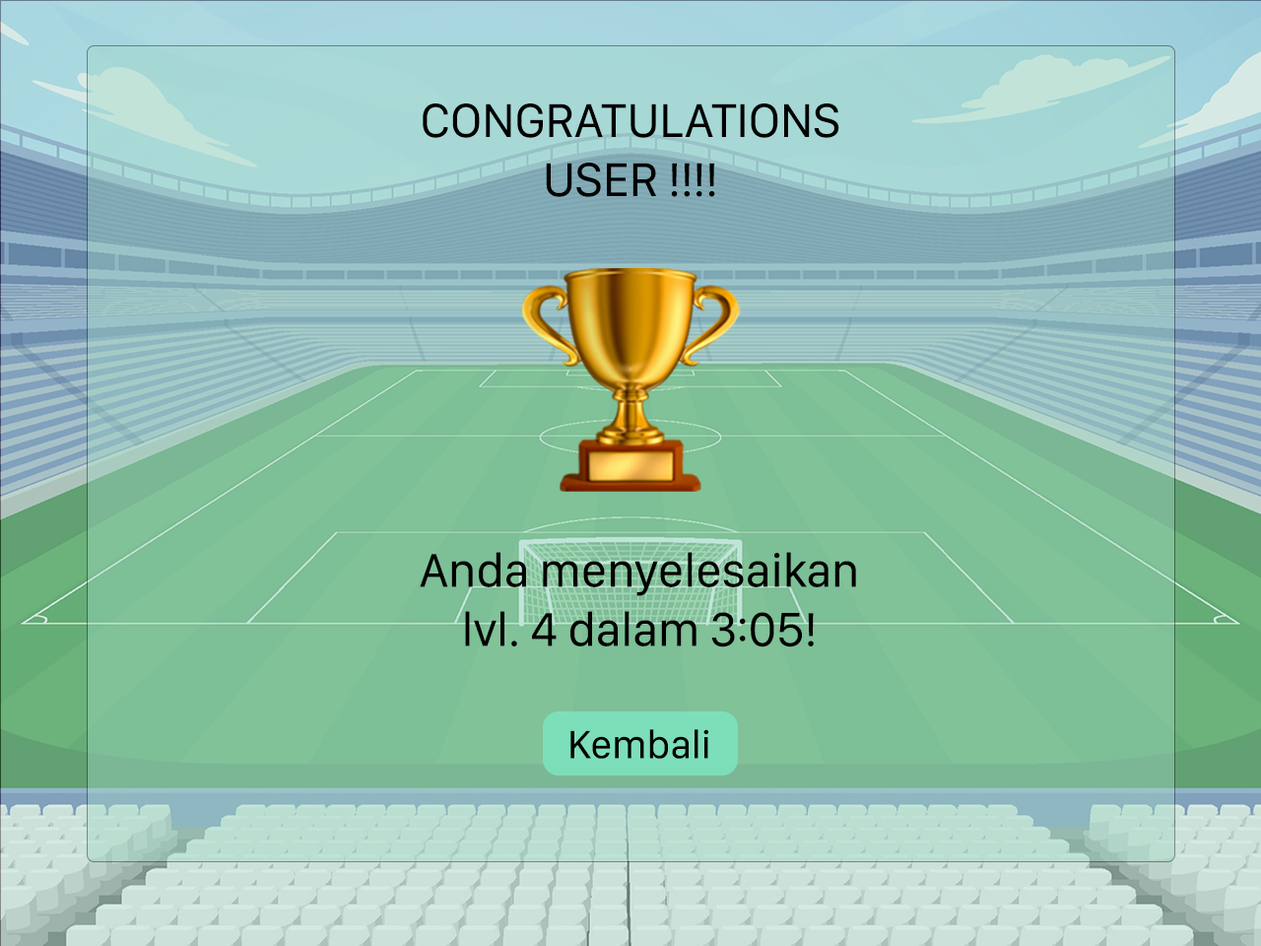
<style>
.page{position:relative;width:1261px;height:946px}
.page>*{position:absolute;margin:0}
.t1{font:49.3px "SFCompactDisplay-Regular";color:#000000}
.t2{font:41px "SFCompactDisplay-Regular";color:#000000}
</style>
<div class="page">
<p class="t1" style="left:423px;top:103px;width:416px;height:94px;text-align:center">CONGRATULATIONS<br>USER !!!!</p>
<p class="t1" style="left:420px;top:552px;width:436px;height:95px;text-align:center">Anda menyelesaikan<br>lvl. 4 dalam 3:05!</p>
<p class="t2" style="left:570px;top:729px;width:138px;height:30px">Kembali</p>
</div>
